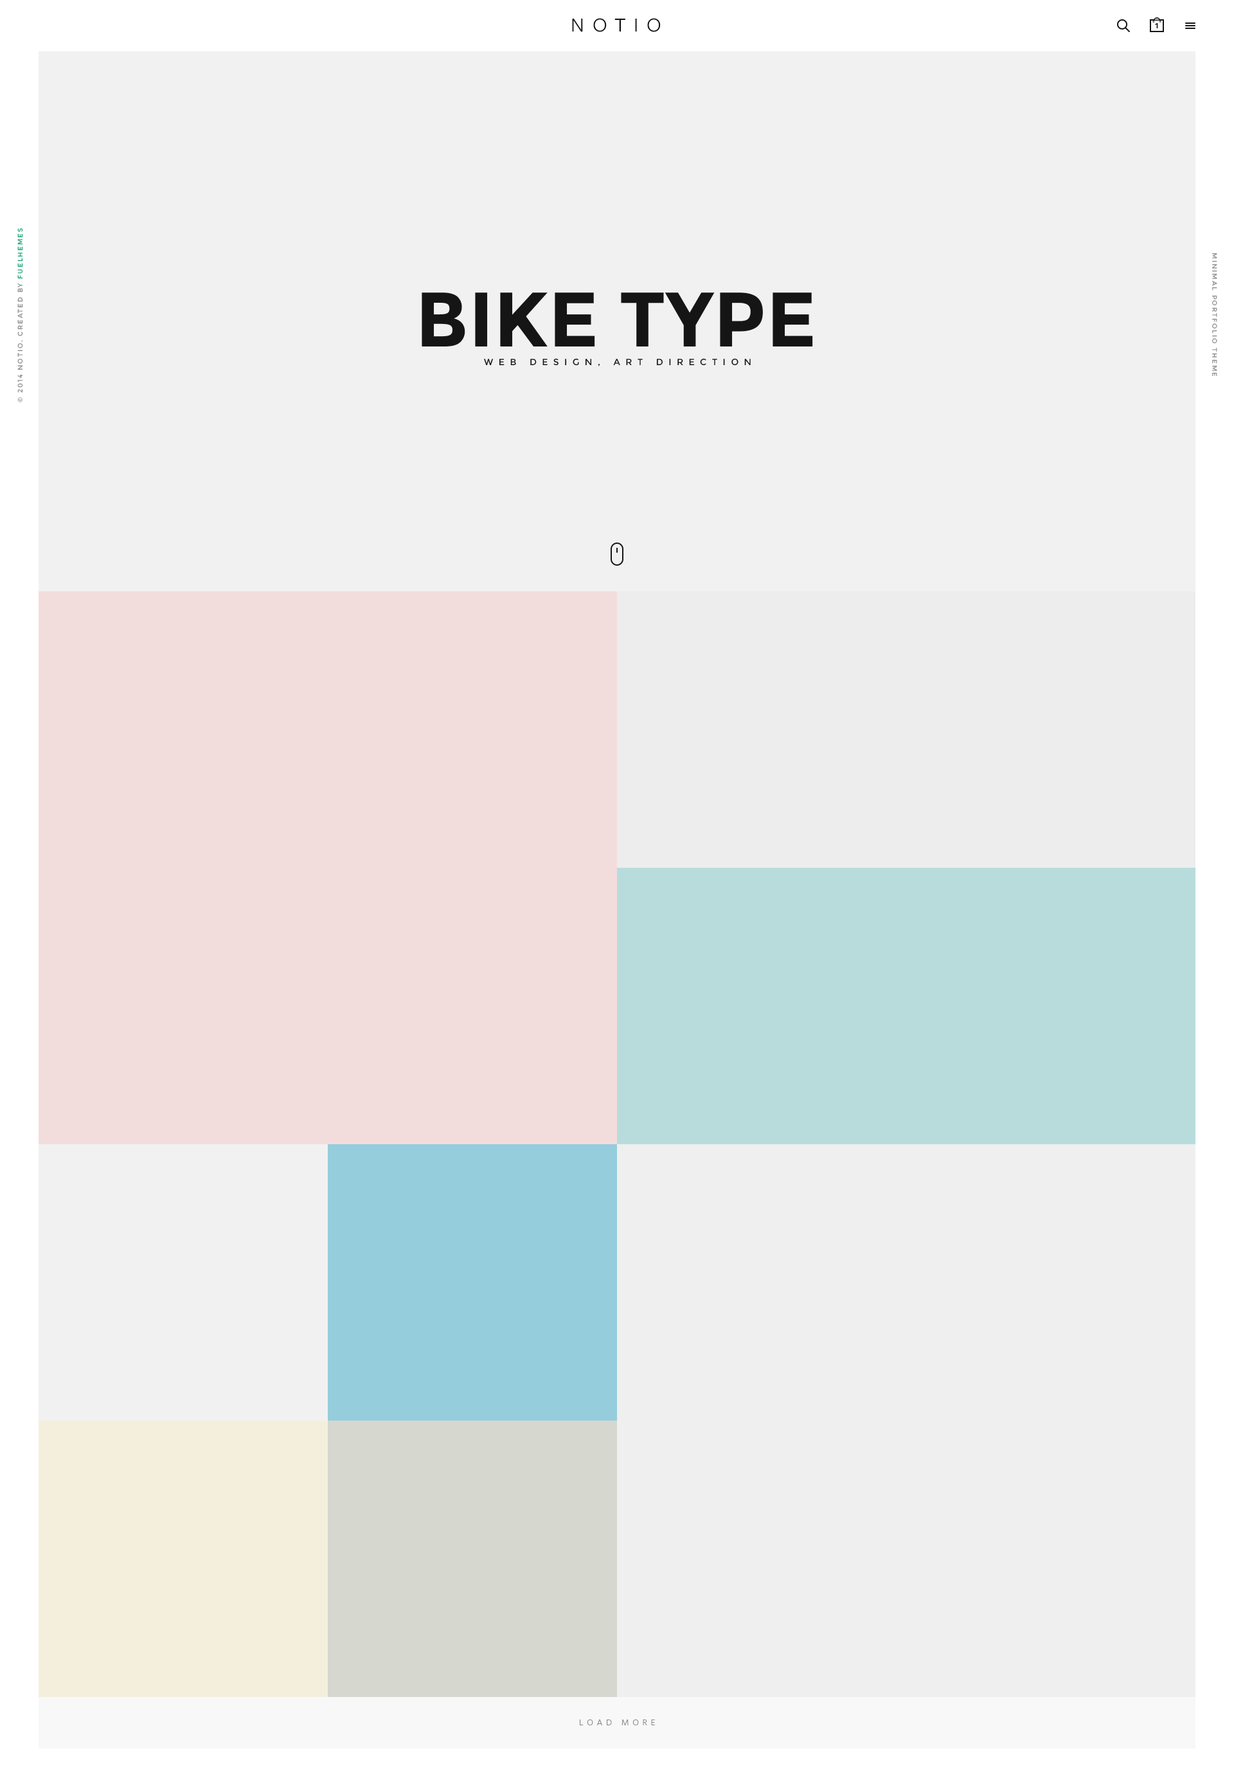
<style>
.page{position:relative;width:1234px;height:1787px;background:#f1f1f1}
.page>*{position:absolute;margin:0}
.t1{font:20.6px "FreightSansProBook-Regular";letter-spacing:0.4em;color:#121212}
.t2{font:7.7px "Hind-Bold";letter-spacing:0.2em;color:#151515;text-transform:uppercase}
.t3{font:6.6px "Montserrat-Regular";letter-spacing:0.2em;color:#909090;text-transform:uppercase}
.t4{font:6.6px "Montserrat-Regular";letter-spacing:0.2em;color:#1aa97f;text-transform:uppercase}
.t5{font:6.5px "Montserrat-Regular";letter-spacing:0.2em;color:#909090}
.t6{font:77.1px "Montserrat-Bold";color:#151515;text-transform:uppercase}
.t7{font:9px "Montserrat-Regular";letter-spacing:0.6em;color:#151515;text-transform:uppercase}
.t8{font:9px "Hind-Light";letter-spacing:0.4em;color:#868686}
</style>
<div class="page">
<p class="t1" style="left:572px;top:18px;width:89px;height:14px">NOTIO</p>
<p class="t2" style="left:1155px;top:23px;width:3px;height:5px">1</p>
<p class="t3" style="left:17px;top:228px;width:6px;height:174px;rotate:-90deg">© 2014 NOTIO. Created by <span class="t4">FUELhemes</span></p>
<p class="t5" style="left:1212px;top:253px;width:6px;height:124px;rotate:90deg">MINIMAL PORTFOLIO THEME</p>
<p class="t6" style="left:422px;top:292px;width:391px;height:54px">BIKE TYPE</p>
<p class="t7" style="left:484px;top:358px;width:267px;height:8px">WEB DESIGN, ART DIRECTION</p>
<p class="t8" style="left:580px;top:1720px;width:75px;height:5px">LOAD MORE</p>
</div>
